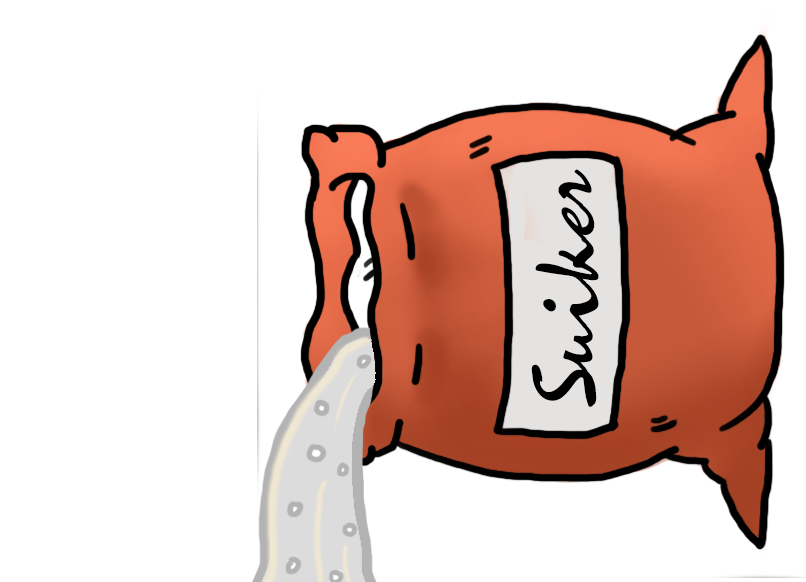
<style>
.page{position:relative;width:806px;height:582px;background:#ffffff}
.page>*{position:absolute;margin:0}
.t1{font:79.2px "Borealis";color:#000000}
</style>
<div class="page">
<p class="t1" style="left:531px;top:169px;width:68px;height:238px;rotate:-90deg">Suiker</p>
</div>
